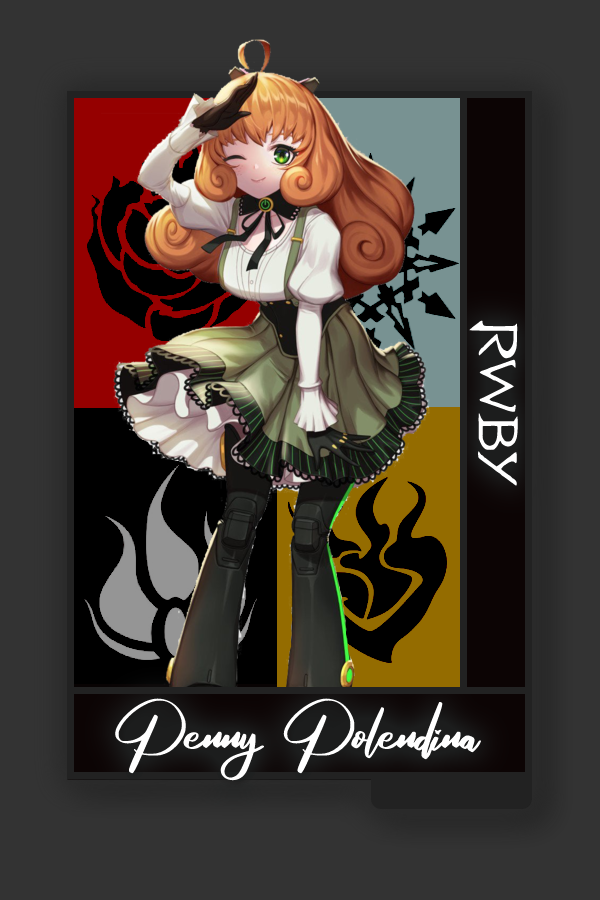
<style>
.page{position:relative;width:600px;height:900px;background:#333333}
.page>*{position:absolute;margin:0}
.t1{font:61.3px "RWBY_Style";color:#ffffff;scale:1.25 1}
.t2{font:76.6px "RosegaFREE";color:#ffffff;scale:0.91 1}
</style>
<div class="page">
<p class="t1" style="left:469px;top:320px;width:49px;height:166px;rotate:90deg">RWBY</p>
<p class="t2" style="left:113px;top:698px;width:369px;height:88px">Penny Polendina</p>
</div>
